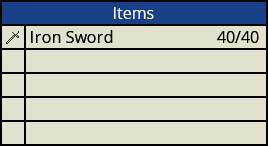
<style>
.page{position:relative;width:268px;height:146px;background:#e2e1ce}
.page>*{position:absolute;margin:0}
.t1{font:16px "OpenSans";color:#ffffff}
.t2{font:16px "OpenSans";color:#000000}
</style>
<div class="page">
<p class="t1" style="left:114px;top:7px;width:40px;height:12px">Items</p>
<p class="t2" style="left:31px;top:30px;width:82px;height:13px">Iron Sword</p>
<p class="t2" style="left:217px;top:31px;width:42px;height:12px">40/40</p>
</div>
